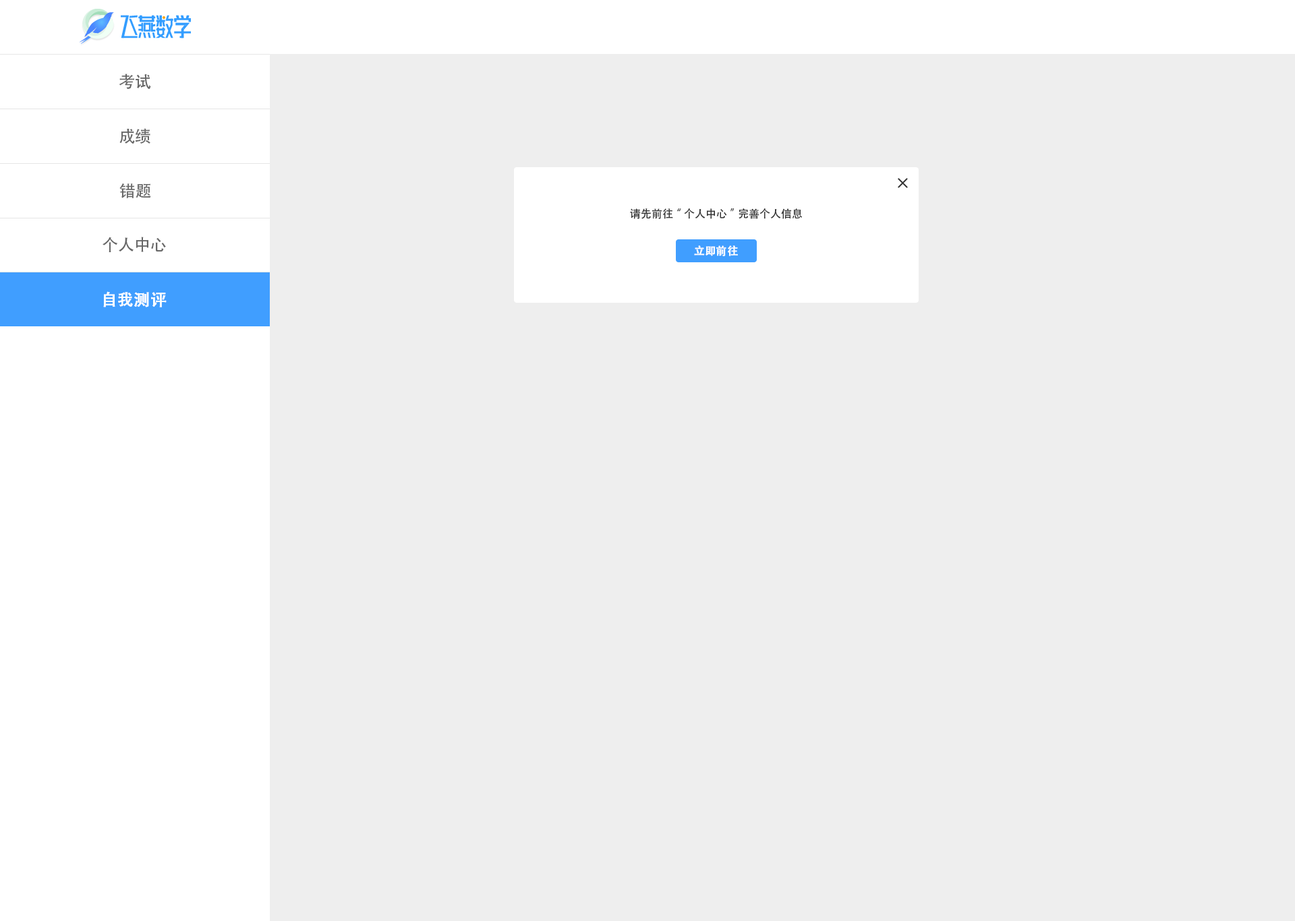
<style>
.page{position:relative;width:1295px;height:921px;background:#eeeeee}
.page>*{position:absolute;margin:0}
.t1{font:16.2px "AdobeHeitiStd-Regular";color:#666666}
.t2{font:10.8px "AdobeHeitiStd-Regular";color:#333333}
.t3{font:10.8px "AdobeHeitiStd-Regular";color:#ffffff;font-weight:bold}
.t4{font:16.2px "AdobeHeitiStd-Regular";color:#ffffff;font-weight:bold}
</style>
<div class="page">
<p class="t1" style="left:119px;top:73px;width:32px;height:16px">考试</p>
<p class="t1" style="left:119px;top:128px;width:31px;height:16px">成绩</p>
<p class="t1" style="left:119px;top:183px;width:32px;height:15px">错题</p>
<p class="t2" style="left:630px;top:208px;width:172px;height:11px">请先前往“个人中心”完善个人信息</p>
<p class="t1" style="left:102px;top:237px;width:64px;height:15px">个人中心</p>
<p class="t3" style="left:694px;top:245px;width:44px;height:11px">立即前往</p>
<p class="t4" style="left:103px;top:291px;width:64px;height:16px">自我测评</p>
</div>
